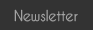
<style>
.page{position:relative;width:93px;height:30px;background:#333333}
.page>*{position:absolute;margin:0}
.t1{font:14px "CaviarDreams";color:#a3a3a3}
</style>
<div class="page">
<p class="t1" style="left:14px;top:9px;width:64px;height:13px">Newsletter</p>
</div>
